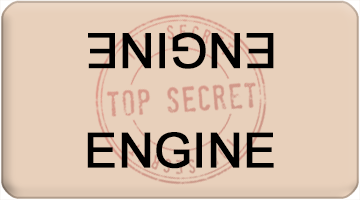
<style>
.page{position:relative;width:360px;height:200px;background:#e8d0bb}
.page>*{position:absolute;margin:0}
.t1{font:48px "ArialMT";color:#000000;font-weight:bold}
</style>
<div class="page">
<p class="t1" style="left:88px;top:32px;width:186px;height:37px;rotate:180deg">ENGINE</p>
<p class="t1" style="left:87px;top:132px;width:187px;height:37px">ENGINE</p>
</div>
